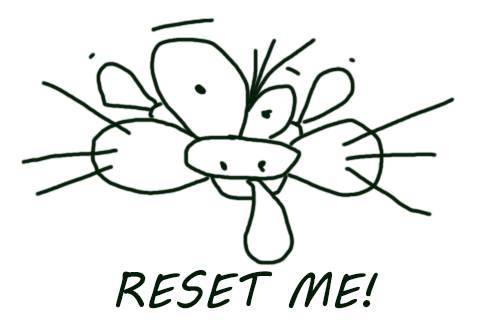
<style>
.page{position:relative;width:480px;height:320px;background:#ffffff}
.page>*{position:absolute;margin:0}
.t1{font:48px "MVBoli";color:#041d08}
</style>
<div class="page">
<p class="t1" style="left:116px;top:270px;width:262px;height:39px">RESET ME!</p>
</div>
